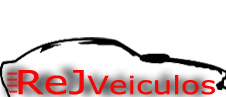
<style>
.page{position:relative;width:226px;height:97px;background:#ffffff}
.page>*{position:absolute;margin:0}
.t1{font:24.9px "MSReferenceSansSerif";color:#f80606;scale:1.26 1}
.t2{font:33.1px "MSReferenceSansSerif";color:#f80606;scale:1.26 1}
</style>
<div class="page">
<p class="t1" style="left:18px;top:70px;width:198px;height:25px"><span class="t2">ReJ</span>Veiculos</p>
</div>
